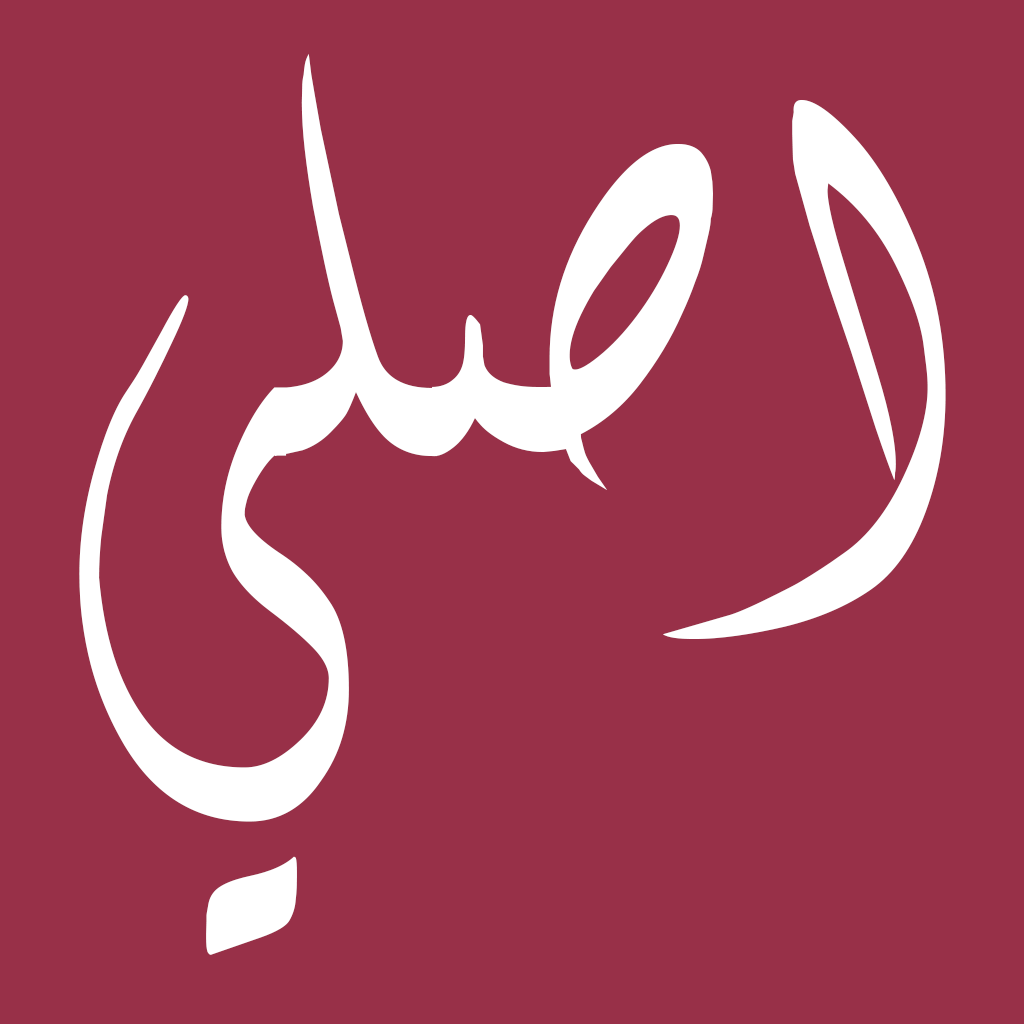
<style>
.page{position:relative;width:1024px;height:1024px;background:#983048}
.page>*{position:absolute;margin:0}
.t1{font:742.9px "FS_Diwany";color:#ffffff}
</style>
<div class="page">
<p class="t1" style="left:79px;top:53px;width:867px;height:902px">اصلي</p>
</div>
